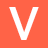
<style>
.page{position:relative;width:48px;height:48px;background:#ff6347}
.page>*{position:absolute;margin:0}
.t1{font:60px "Tahoma";color:#ffffff}
</style>
<div class="page">
<p class="t1" style="left:9px;top:7px;width:30px;height:33px">v</p>
</div>
